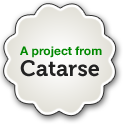
<style>
.page{position:relative;width:128px;height:128px;background:#ffffff}
.page>*{position:absolute;margin:0}
.t1{font:12px "HelveticaNeue-Bold";color:#008800}
.t2{font:22px "Museo-700";color:#222222}
</style>
<div class="page">
<p class="t1" style="left:20px;top:46px;width:82px;height:12px">A project from</p>
<p class="t2" style="left:20px;top:60px;width:79px;height:17px">Catarse</p>
</div>
